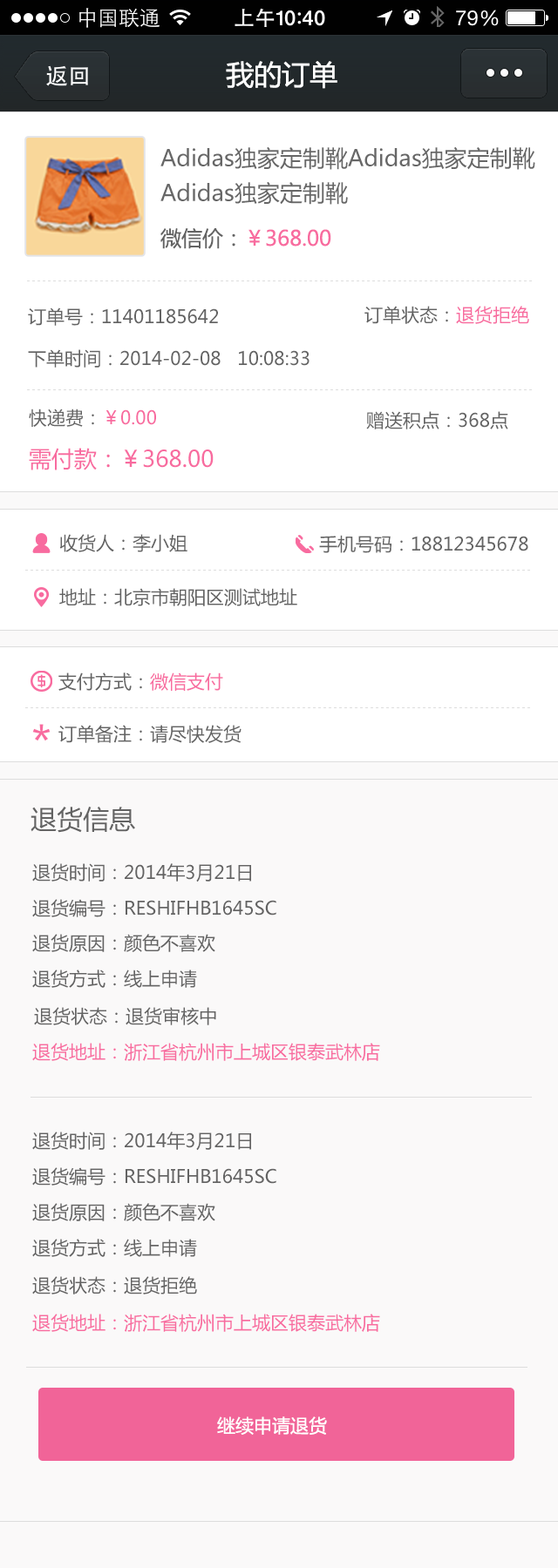
<style>
.page{position:relative;width:558px;height:1568px;background:#faf9f9}
.page>*{position:absolute;margin:0}
.t1{font:27.9px "MicrosoftYaHei";color:#ffffff}
.t2{font:22.6px/34.8px "MicrosoftYaHei";color:#676767}
.t3{font:20.9px "MicrosoftYaHei";color:#f86b9f}
.t4{font:20.9px "MicrosoftYaHei";color:#636363}
.t5{font:5.2px "SimSun";color:#dddddd}
.t6{font:18.3px "MicrosoftYaHei";color:#636363}
.t7{font:18.3px "MicrosoftYaHei";color:#f86b9f}
.t8{font:22.6px "MicrosoftYaHei";color:#f86b9f}
.t9{font:44.3px "MicrosoftYaHei";color:#f86b9f}
.t10{font:26.1px "MicrosoftYaHei";color:#636363}
.t11{font:18.3px "MicrosoftYaHei";color:#ffffff}
</style>
<div class="page">
<p class="t1" style="left:226px;top:61px;width:111px;height:28px">我的订单</p>
<p class="t2" style="left:160px;top:146px;width:375px;height:59px">Adidas独家定制靴Adidas独家定制靴Adidas独家定制靴</p>
<p class="t3" style="left:160px;top:228px;width:171px;height:21px"><span class="t4">微信价：</span>￥368.00</p>
<p class="t5" style="left:27px;top:280px;width:504px;height:1px">- - - - - - - - - - - - - - - - - - - - - - - - - - - - - - - - - - - - - - - - - - - - - - - - - - - - - - - - - - - - - - - - - - - - - - - - - - - - - - - - - - - - - - - - - - - - - - - - -</p>
<p class="t6" style="left:364px;top:306px;width:165px;height:18px">订单状态：<span class="t7">退货拒绝</span></p>
<p class="t6" style="left:28px;top:308px;width:190px;height:18px">订单号：11401185642</p>
<p class="t6" style="left:28px;top:349px;width:281px;height:19px">下单时间：2014-02-08   10:08:33</p>
<p class="t5" style="left:27px;top:389px;width:504px;height:1px">- - - - - - - - - - - - - - - - - - - - - - - - - - - - - - - - - - - - - - - - - - - - - - - - - - - - - - - - - - - - - - - - - - - - - - - - - - - - - - - - - - - - - - - - - - - - - - - - -</p>
<p class="t7" style="left:29px;top:409px;width:127px;height:18px"><span class="t6">快递费：</span>￥0.00</p>
<p class="t6" style="left:366px;top:411px;width:142px;height:18px">赠送积点：368点</p>
<p class="t8" style="left:29px;top:448px;width:184px;height:22px">需付款：￥368.00</p>
<p class="t6" style="left:59px;top:534px;width:128px;height:18px">收货人：李小姐</p>
<p class="t6" style="left:319px;top:535px;width:209px;height:18px">手机号码：18812345678</p>
<p class="t5" style="left:25px;top:570px;width:505px;height:1px">- - - - - - - - - - - - - - - - - - - - - - - - - - - - - - - - - - - - - - - - - - - - - - - - - - - - - - - - - - - - - - - - - - - - - - - - - - - - - - - - - - - - - - - - - - - - - - - - -</p>
<p class="t6" style="left:59px;top:588px;width:238px;height:18px">地址：北京市朝阳区测试地址</p>
<p class="t6" style="left:58px;top:672px;width:165px;height:19px">支付方式：<span class="t7">微信支付</span></p>
<p class="t5" style="left:25px;top:707px;width:505px;height:1px">- - - - - - - - - - - - - - - - - - - - - - - - - - - - - - - - - - - - - - - - - - - - - - - - - - - - - - - - - - - - - - - - - - - - - - - - - - - - - - - - - - - - - - - - - - - - - - - - -</p>
<p class="t9" style="left:32px;top:724px;width:19px;height:17px">*</p>
<p class="t6" style="left:58px;top:725px;width:183px;height:18px">订单备注：请尽快发货</p>
<p class="t10" style="left:30px;top:807px;width:105px;height:26px">退货信息</p>
<p class="t6" style="left:32px;top:863px;width:219px;height:19px">退货时间：2014年3月21日</p>
<p class="t6" style="left:32px;top:899px;width:244px;height:18px">退货编号：RESHIFHB1645SC</p>
<p class="t6" style="left:32px;top:934px;width:183px;height:18px">退货原因：颜色不喜欢</p>
<p class="t6" style="left:32px;top:970px;width:165px;height:18px">退货方式：线上申请</p>
<p class="t6" style="left:34px;top:1007px;width:182px;height:18px">退货状态：退货审核中</p>
<p class="t7" style="left:32px;top:1043px;width:348px;height:18px">退货地址：浙江省杭州市上城区银泰武林店</p>
<p class="t6" style="left:32px;top:1132px;width:219px;height:19px">退货时间：2014年3月21日</p>
<p class="t6" style="left:32px;top:1167px;width:244px;height:19px">退货编号：RESHIFHB1645SC</p>
<p class="t6" style="left:32px;top:1203px;width:183px;height:18px">退货原因：颜色不喜欢</p>
<p class="t6" style="left:32px;top:1239px;width:165px;height:18px">退货方式：线上申请</p>
<p class="t6" style="left:32px;top:1276px;width:165px;height:18px">退货状态：退货拒绝</p>
<p class="t7" style="left:32px;top:1314px;width:348px;height:18px">退货地址：浙江省杭州市上城区银泰武林店</p>
<p class="t11" style="left:217px;top:1416px;width:110px;height:19px">继续申请退货</p>
</div>
